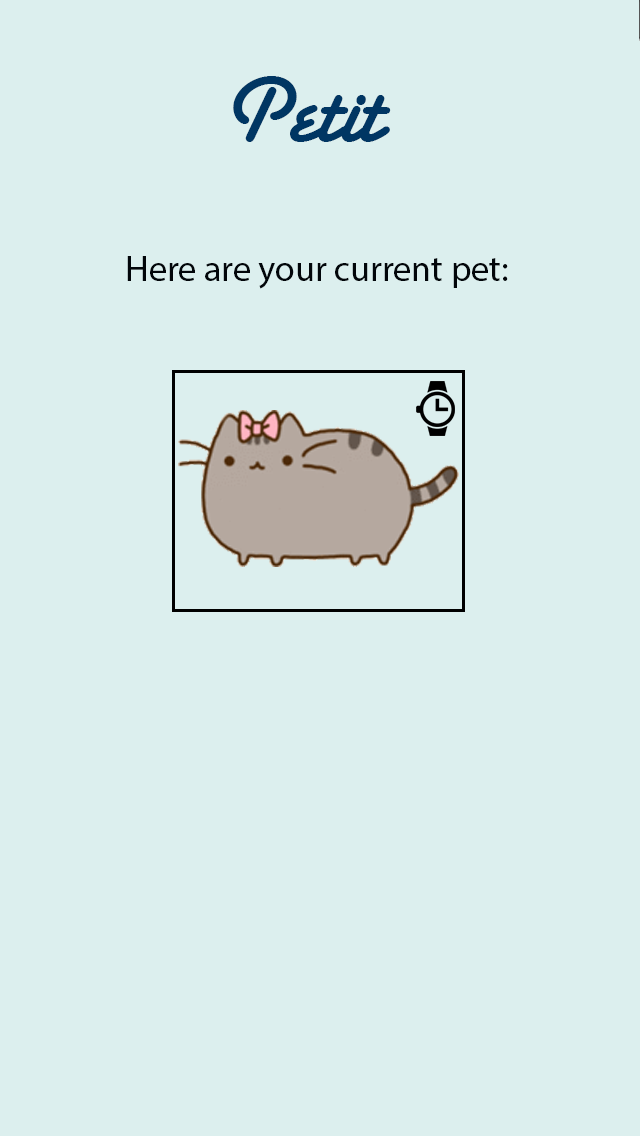
<style>
.page{position:relative;width:640px;height:1136px;background:#dcefee}
.page>*{position:absolute;margin:0}
.t1{font:100px "SantaFeLetPlain";color:#003663}
.t2{font:36px "MyriadPro-Regular";color:#02060a}
</style>
<div class="page">
<p class="t1" style="left:233px;top:76px;width:158px;height:66px">Petit</p>
<p class="t1" style="left:233px;top:76px;width:158px;height:66px">Petit</p>
<p class="t2" style="left:127px;top:256px;width:395px;height:33px">Here are your current pets:</p>
<p class="t2" style="left:127px;top:256px;width:381px;height:33px">Here are your current pet:</p>
</div>
